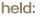
<style>
.page{position:relative;width:55px;height:17px;background:#ffffff}
.page>*{position:absolute;margin:0}
.t1{font:14px "GothicMB101Pro-DeBold";letter-spacing:-0.04em;color:#8b6e51}
</style>
<div class="page">
<p class="t1" style="left:1px;top:2px;width:34px;height:12px;opacity:0.9">held:</p>
</div>
